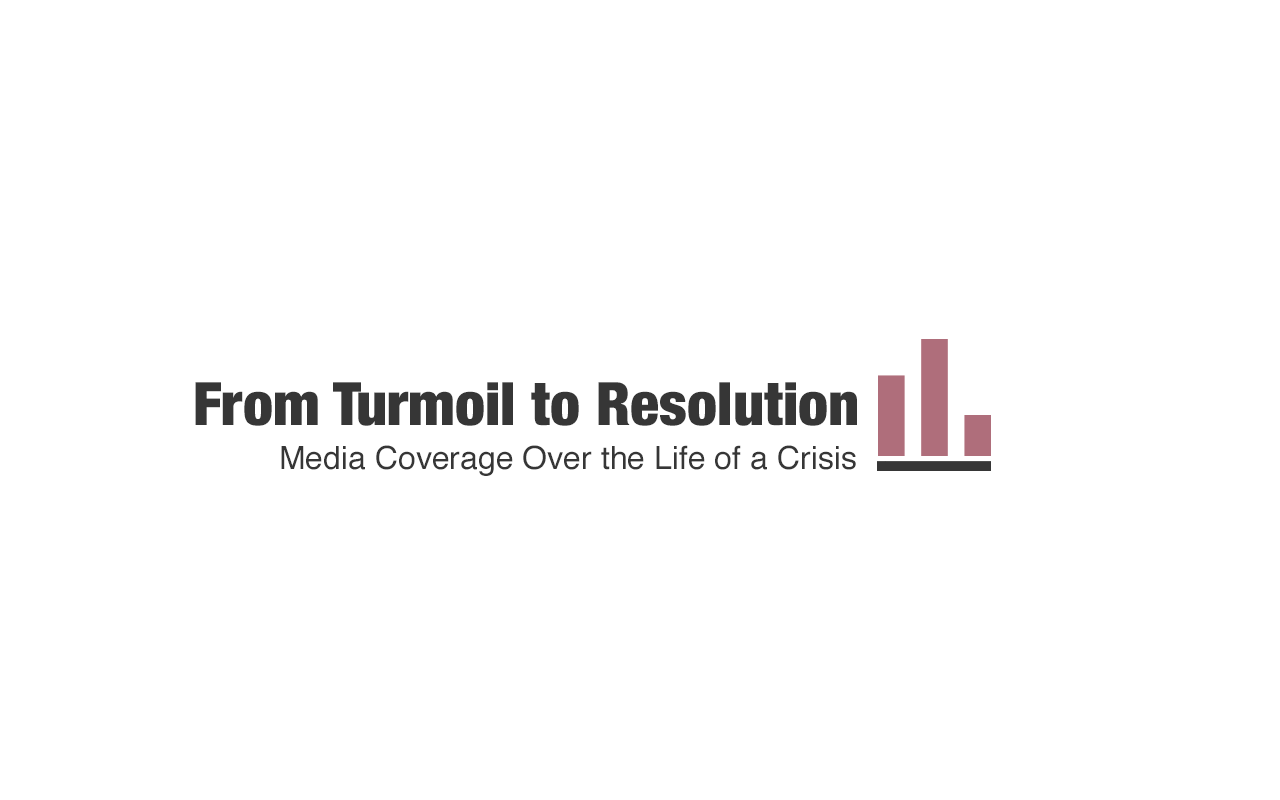
<style>
.page{position:relative;width:1280px;height:800px;background:#ffffff}
.page>*{position:absolute;margin:0}
.t1{font:60px "HelveticaNeue-CondensedBlack";color:#363636}
.t2{font:32px "Helvetica";color:#363636}
</style>
<div class="page">
<p class="t1" style="left:195px;top:382px;width:662px;height:44px">From Turmoil to Resolution</p>
<p class="t2" style="left:281px;top:445px;width:575px;height:31px">Media Coverage Over the Life of a Crisis</p>
</div>
